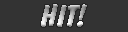
<style>
.page{position:relative;width:128px;height:32px;background:#333333}
.page>*{position:absolute;margin:0}
.t1{font:30px "DomDiagonalBT-Bold"}
</style>
<div class="page">
<p class="t1" style="left:41px;top:4px;width:46px;height:23px">HIT!</p>
</div>
